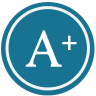
<style>
.page{position:relative;width:96px;height:96px;background:#187393}
.page>*{position:absolute;margin:0}
.t1{font:47.2px "Byington";color:#ffffff}
</style>
<div class="page">
<p class="t1" style="left:25px;top:30px;width:52px;height:37px">A+</p>
</div>
